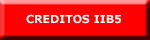
<style>
.page{position:relative;width:150px;height:40px;background:#ff0000}
.page>*{position:absolute;margin:0}
.t1{font:11px "Verdana-Bold";color:#ffffff}
</style>
<div class="page">
<p class="t1" style="left:26px;top:14px;width:95px;height:10px">CREDITOS IIB5</p>
</div>
